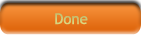
<style>
.page{position:relative;width:141px;height:37px}
.page>*{position:absolute;margin:0}
.t1{font:15px "TrebuchetMS";color:#cecb79}
</style>
<div class="page">
<p class="t1" style="left:55px;top:13px;width:33px;height:12px">Done</p>
</div>
